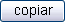
<style>
.page{position:relative;width:65px;height:22px}
.page>*{position:absolute;margin:0}
.t1{font:12.6px "ArialMT";color:#000000;scale:1.1 1}
</style>
<div class="page">
<p class="t1" style="left:15px;top:5px;width:38px;height:13px">copiar</p>
</div>
